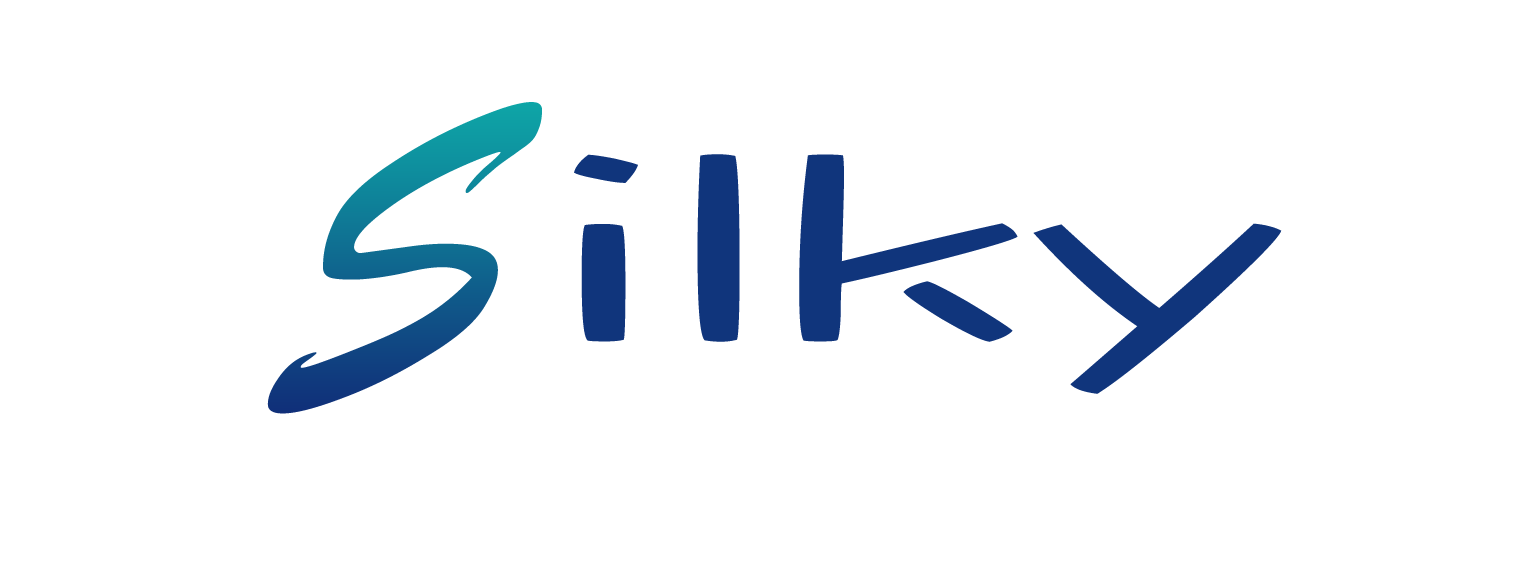
<style>
.page{position:relative;width:1517px;height:582px;background:#ffffff}
.page>*{position:absolute;margin:0}
.t1{font:351.5px "STXingkai-SC-Bold";letter-spacing:-0.01em;scale:1.24 1}
.t2{font:278.6px "DFWaWaSC-W5";letter-spacing:-0.01em;color:#10357c;scale:1.95 1}
</style>
<div class="page">
<p class="t1" style="left:267px;top:102px;width:275px;height:312px;rotate:-21deg">S</p>
<p class="t2" style="left:574px;top:154px;width:708px;height:240px">ilky</p>
</div>
